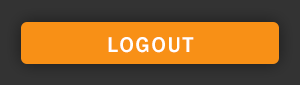
<style>
.page{position:relative;width:300px;height:85px;background:#f89016}
.page>*{position:absolute;margin:0}
.t1{font:22.2px "FranklinGothic-Medium";letter-spacing:0.075em;color:#ffffff}
</style>
<div class="page">
<p class="t1" style="left:108px;top:37px;width:86px;height:16px">LOGOUT</p>
</div>
